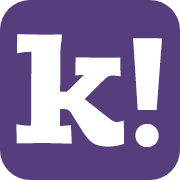
<style>
.page{position:relative;width:180px;height:180px;background:#563d7c}
.page>*{position:absolute;margin:0}
.t1{font:142.8px "Zantroke";letter-spacing:0.01em;color:#ffffff}
</style>
<div class="page">
<p class="t1" style="left:16px;top:34px;width:146px;height:113px">k!</p>
</div>
